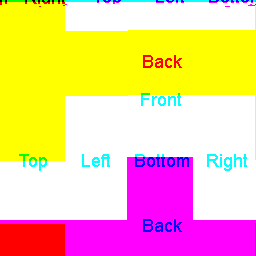
<style>
.page{position:relative;width:256px;height:256px;background:#ffffff}
.page>*{position:absolute;margin:0}
.t1{font:18px "ArialMT"}
</style>
<div class="page">
<p class="t1" style="left:141px;top:91px;width:40px;height:13px">Front</p>
<p class="t1" style="left:19px;top:152px;width:28px;height:17px">Top</p>
<p class="t1" style="left:82px;top:152px;width:28px;height:13px">Left</p>
<p class="t1" style="left:135px;top:152px;width:54px;height:13px">Bottom</p>
<p class="t1" style="left:207px;top:152px;width:40px;height:17px">Right</p>
</div>
